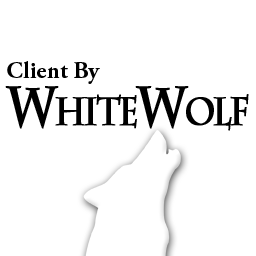
<style>
.page{position:relative;width:256px;height:256px;background:#ffffff}
.page>*{position:absolute;margin:0}
.t1{font:24px "AGaramondPro-Bold";color:#000000}
.t2{font:55.2px "CharlemagneStd-Bold";letter-spacing:-0.075em;color:#000000;font-variant:small-caps;font-weight:bold;scale:0.83 1}
</style>
<div class="page">
<p class="t1" style="left:7px;top:61px;width:93px;height:23px">Client By</p>
<p class="t2" style="left:5px;top:86px;width:244px;height:45px">WhiteWolf</p>
</div>
